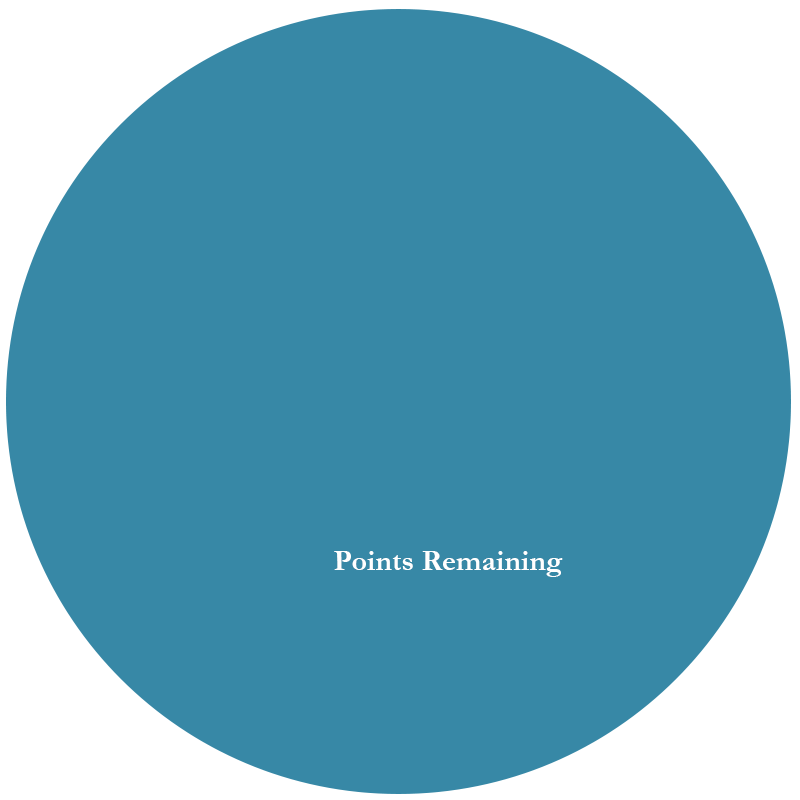
<style>
.page{position:relative;width:800px;height:800px;background:#3788a6}
.page>*{position:absolute;margin:0}
.t1{font:30px "Garamond-Bold";color:#ffffff}
</style>
<div class="page">
<p class="t1" style="left:334px;top:551px;width:229px;height:26px">Points Remaining</p>
</div>
